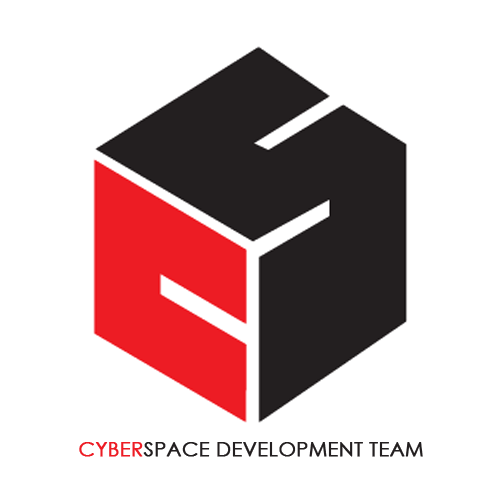
<style>
.page{position:relative;width:500px;height:500px;background:#ffffff}
.page>*{position:absolute;margin:0}
.t1{font:20px "CenturyGothic";color:#231f20;font-weight:bold}
.t2{font:20px "CenturyGothic";color:#ed1c24;font-weight:bold}
</style>
<div class="page">
<p class="t1" style="left:79px;top:442px;width:344px;height:15px"><span class="t2">CYBER</span>SPACE DEVELOPMENT TEAM</p>
</div>
